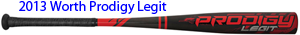
<style>
.page{position:relative;width:300px;height:35px;background:#ffffff}
.page>*{position:absolute;margin:0}
.t1{font:14px "MyriadPro-Regular";color:#0000ff}
</style>
<div class="page">
<p class="t1" style="left:19px;top:1px;width:148px;height:13px">2013 Worth Prodigy Legit</p>
</div>
